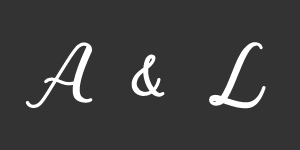
<style>
.page{position:relative;width:300px;height:150px;background:#333333}
.page>*{position:absolute;margin:0}
.t1{font:60px "Nazeefa-Script";letter-spacing:0.07em;color:#ffffff;font-weight:bold}
</style>
<div class="page">
<p class="t1" style="left:25px;top:42px;width:241px;height:67px">A &amp; L</p>
</div>
